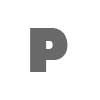
<style>
.page{position:relative;width:100px;height:100px;background:#ffffff}
.page>*{position:absolute;margin:0}
.t1{font:60px "OpineHeavy";color:#696969}
</style>
<div class="page">
<p class="t1" style="left:30px;top:28px;width:38px;height:44px">P</p>
</div>
